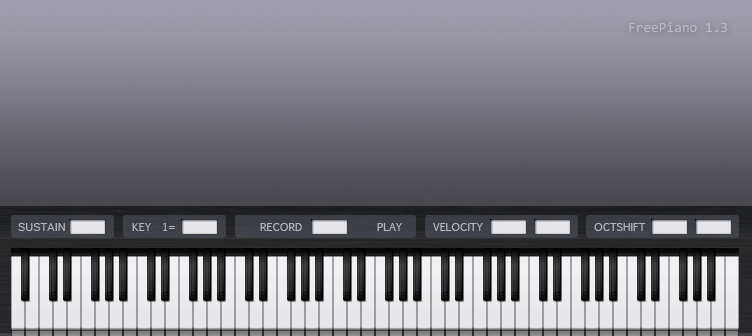
<style>
.page{position:relative;width:752px;height:336px}
.page>*{position:absolute;margin:0}
.t1{font:14px "Consolas";color:#bab8c3}
.t2{font:11px "ArialMT";color:#b7b8bd}
.t3{font:11px "EuphemiaCAS";color:#b7b8bd}
</style>
<div class="page">
<p class="t1" style="left:629px;top:22px;width:98px;height:10px">FreePiano 1.3</p>
<p class="t2" style="left:18px;top:223px;width:47px;height:8px">SUSTAIN</p>
<p class="t3" style="left:132px;top:223px;width:43px;height:8px">KEY  1=</p>
<p class="t3" style="left:260px;top:223px;width:42px;height:8px">RECORD</p>
<p class="t3" style="left:377px;top:223px;width:25px;height:8px">PLAY</p>
<p class="t3" style="left:433px;top:223px;width:50px;height:8px">VELOCITY</p>
<p class="t3" style="left:594px;top:223px;width:52px;height:8px">OCTSHIFT</p>
</div>
